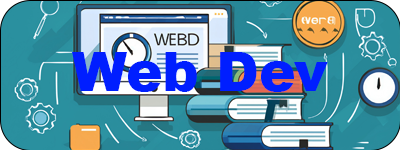
<style>
.page{position:relative;width:400px;height:150px}
.page>*{position:absolute;margin:0}
.t1{font:54.7px "Arial-Black";color:#001eff}
</style>
<div class="page">
<p class="t1" style="left:72px;top:52px;width:256px;height:40px">Web Dev</p>
</div>
